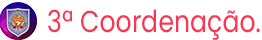
<style>
.page{position:relative;width:262px;height:40px;background:#ffffff}
.page>*{position:absolute;margin:0}
.t1{font:30.3px "Poppins-Regular";letter-spacing:0.005em;color:#f63854;scale:0.83 1}
</style>
<div class="page">
<p class="t1" style="left:48px;top:9px;width:212px;height:31px">3ª Coordenação.</p>
</div>
